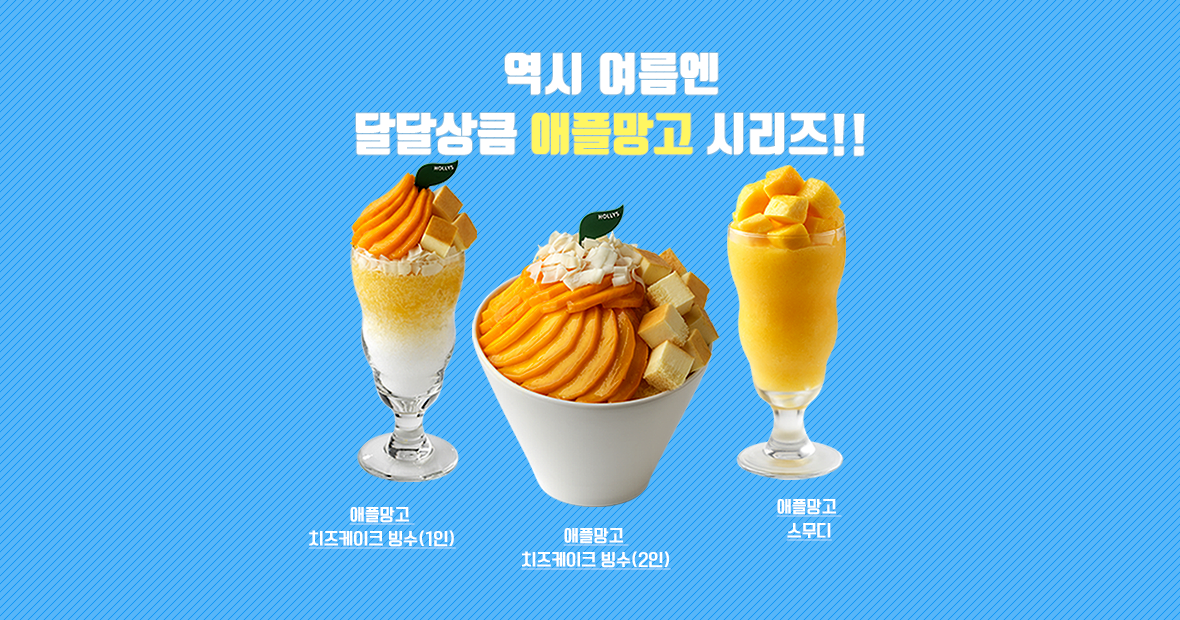
<style>
.page{position:relative;width:1180px;height:620px;background:#58b6f8}
.page>*{position:absolute;margin:0}
.t1{font:45px/60px "TmonMonsoriBlack";letter-spacing:0.005em;color:#ffffff}
.t2{font:45px/60px "TmonMonsoriBlack";letter-spacing:0.005em;color:#fff661}
.t3{font:16px/24px "TTManbalchungchunL";letter-spacing:0.005em;color:#ffffff;font-weight:bold;text-decoration:underline}
</style>
<div class="page">
<p class="t1" style="left:356px;top:52px;width:509px;height:104px;text-align:center">역시 여름엔<br>달달상큼 <span class="t2">애플망고</span> 시리즈!!</p>
<p class="t3" style="left:308px;top:507px;width:148px;height:42px;text-align:center">애플망고 <br>치즈케이크 빙수(1인)</p>
<p class="t3" style="left:776px;top:499px;width:66px;height:42px;text-align:center">애플망고 <br>스무디</p>
<p class="t3" style="left:521px;top:528px;width:150px;height:42px;text-align:center">애플망고 <br>치즈케이크 빙수(2인)</p>
</div>
